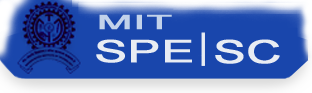
<style>
.page{position:relative;width:312px;height:93px;background:#1946ac}
.page>*{position:absolute;margin:0}
.t1{font:19.6px "ArialMT";color:#c2d2ea;font-weight:bold;scale:2.13 1}
.t2{font:30.9px "ArialMT";color:#e8ecf3;font-weight:bold;scale:1.56 1}
.t3{font:32.2px "ArialMT";color:#e8ecf3;font-weight:bold;scale:1.48 1}
</style>
<div class="page">
<p class="t1" style="left:99px;top:14px;width:73px;height:16px">MIT</p>
<p class="t2" style="left:96px;top:39px;width:96px;height:24px">SPE</p>
<p class="t3" style="left:215px;top:39px;width:65px;height:25px">SC</p>
</div>
